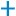
<style>
.page{position:relative;width:16px;height:16px;background:#ffffff}
.page>*{position:absolute;margin:0}
.t1{font:26.3px "MuseoSans-500";color:#0086c4}
</style>
<div class="page">
<p class="t1" style="left:1px;top:1px;width:14px;height:15px">+</p>
</div>
